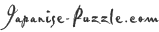
<style>
.page{position:relative;width:159px;height:32px;background:#ffffff}
.page>*{position:absolute;margin:0}
.t1{font:24px "PabloLetPlain";letter-spacing:0.05em;color:#333333}
.t2{font:30px "PabloLetPlain";letter-spacing:0.05em;color:#333333}
</style>
<div class="page">
<p class="t1" style="left:0px;top:4px;width:159px;height:27px"><span class="t2">   </span>Japanise-Puzzle.com</p>
</div>
